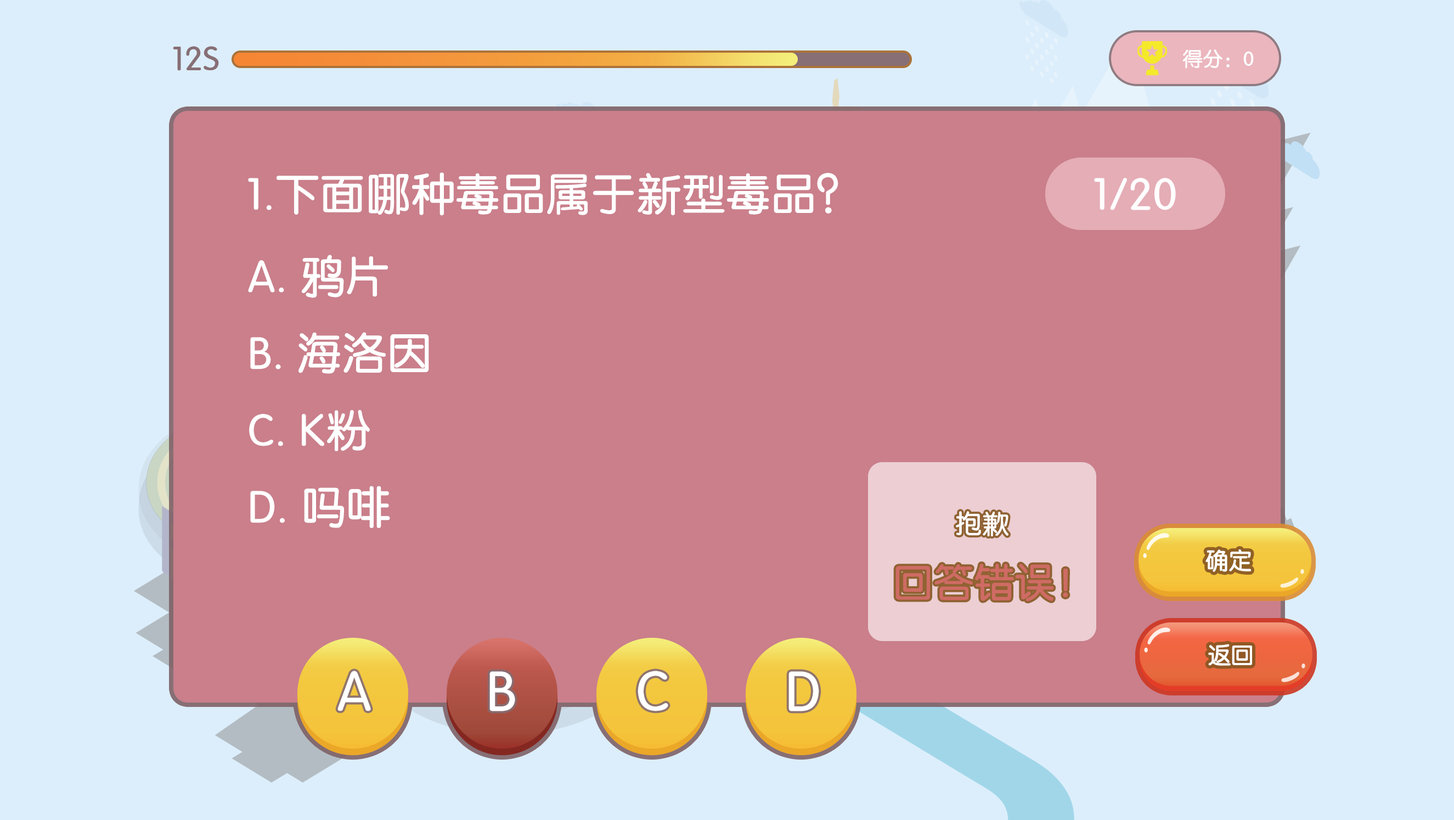
<style>
.page{position:relative;width:1454px;height:820px;background:#ca7f8b}
.page>*{position:absolute;margin:0}
.t1{font:32.9px "JZunYuan";color:#876f75;font-weight:bold}
.t2{font:19.8px "JZunYuan";color:#ffffff;font-weight:bold}
.t3{font:43.9px "JZunYuan";color:#ffffff;font-weight:bold}
.t4{font:26.3px "JZunYuan";color:#ffffff;font-weight:bold}
.t5{font:19.8px "JZunYuan";color:#66ae2c;font-weight:bold}
.t6{font:22.9px "JZunYuan";color:#ffffff;font-weight:bold}
.t7{font:39.5px "JZunYuan";color:#cf6b64;font-weight:bold}
.t8{font:54.9px "JZunYuan";color:#ffffff;font-weight:bold}
</style>
<div class="page">
<p class="t1" style="left:173px;top:46px;width:46px;height:25px">12S</p>
<p class="t2" style="left:1183px;top:49px;width:71px;height:20px">得分：0</p>
<p class="t3" style="left:248px;top:172px;width:591px;height:44px">1.下面哪种毒品属于新型毒品？</p>
<p class="t3" style="left:1094px;top:178px;width:82px;height:32px">1/20</p>
<p class="t3" style="left:248px;top:255px;width:181px;height:273px">A. 鸦片<br>B. 海洛因<br>C. K粉<br>D. 吗啡</p>
<p class="t4" style="left:956px;top:511px;width:53px;height:26px"><span class="t5">  </span>抱歉</p>
<p class="t6" style="left:1206px;top:549px;width:45px;height:23px">确定</p>
<p class="t7" style="left:896px;top:564px;width:173px;height:37px">回答错误！</p>
<p class="t6" style="left:1208px;top:644px;width:45px;height:22px">返回</p>
<p class="t8" style="left:338px;top:671px;width:33px;height:40px">A</p>
<p class="t8" style="left:490px;top:671px;width:25px;height:40px">B</p>
<p class="t8" style="left:638px;top:671px;width:30px;height:40px">C</p>
<p class="t8" style="left:789px;top:671px;width:30px;height:40px">D</p>
</div>
